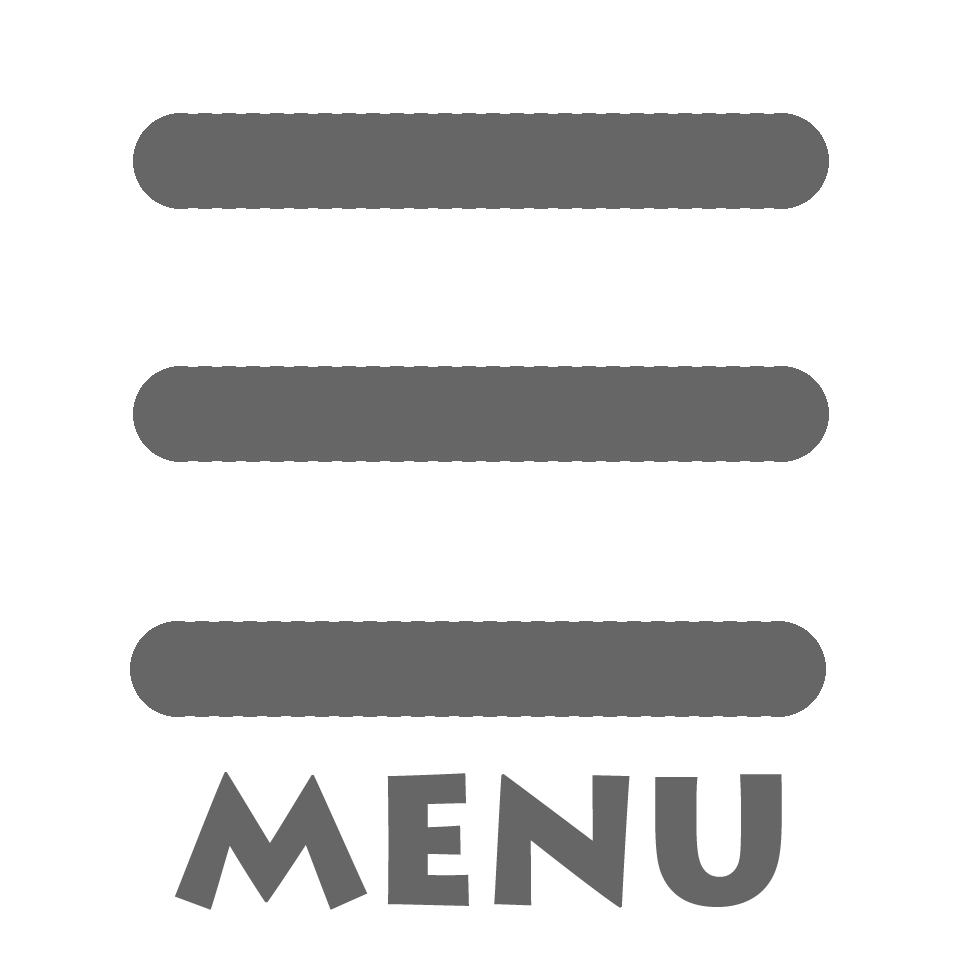
<style>
.page{position:relative;width:960px;height:960px;background:#ffffff}
.page>*{position:absolute;margin:0}
.t1{font:180px "LithosPro-Black";color:#666666}
</style>
<div class="page">
<p class="t1" style="left:175px;top:772px;width:607px;height:138px">MENU</p>
</div>
